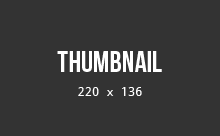
<style>
.page{position:relative;width:220px;height:136px;background:#333333}
.page>*{position:absolute;margin:0}
.t1{font:30px "BebasNeue";color:#ffffff}
.t2{font:12px "DroidSansMono";color:#ffffff}
</style>
<div class="page">
<p class="t1" style="left:57px;top:51px;width:105px;height:21px">Thumbnail</p>
<p class="t2" style="left:78px;top:87px;width:64px;height:9px">220 x 136</p>
</div>
